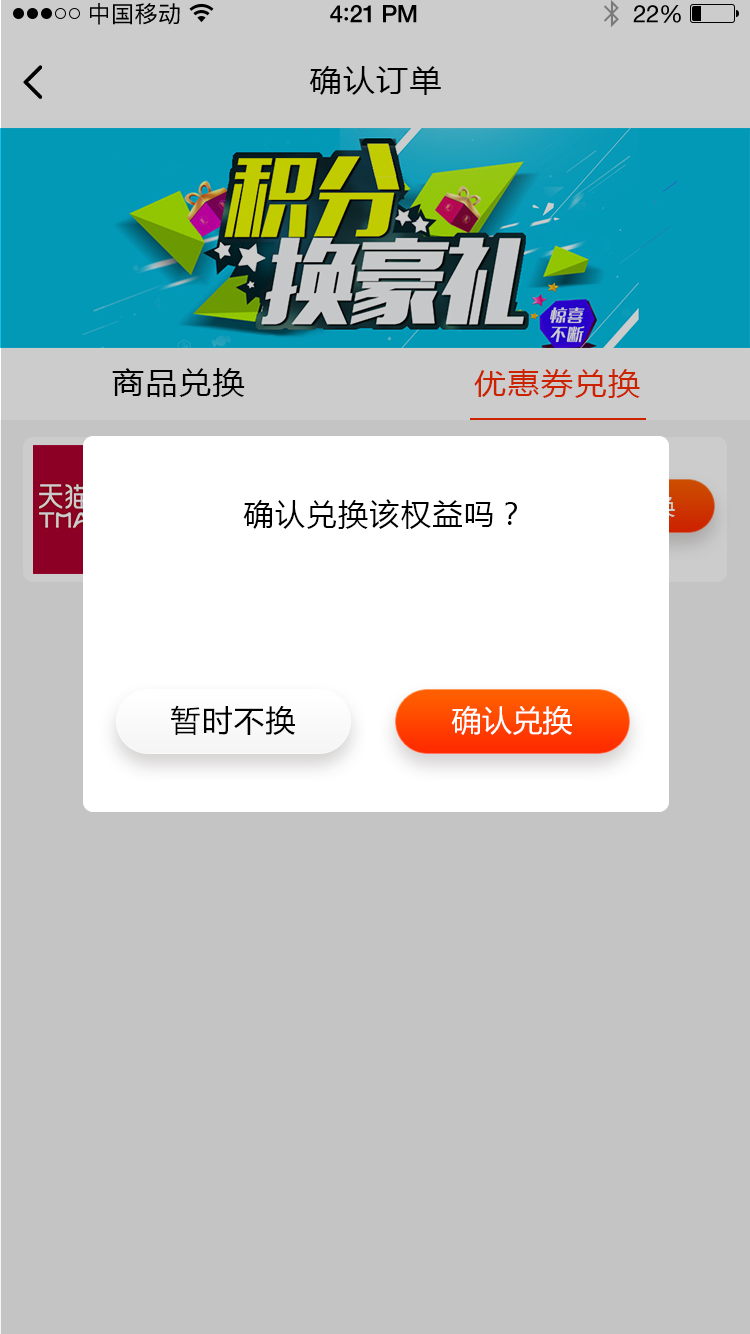
<style>
.page{position:relative;width:750px;height:1334px;background:#c4c4c4}
.page>*{position:absolute;margin:0}
.t1{font:23px "PingFangSC-Regular";letter-spacing:0.02em;color:#000000}
.t2{font:24px "HelveticaNeue-Medium";letter-spacing:-0.02em;color:#000000}
.t3{font:26px "Avenir-Medium";letter-spacing:-0.02em;color:#000000}
.t4{font:24px "HelveticaNeue";letter-spacing:-0.02em;color:#000000}
.t5{font:30px "MicrosoftYaHei";letter-spacing:0.05em;color:#000000;scale:1.06 1}
.t6{font:30px "MicrosoftYaHei";letter-spacing:0.05em;color:#cc2200;scale:1.06 1}
.t7{font:30px "MicrosoftYaHei";letter-spacing:0.05em;color:#000000;text-transform:uppercase}
.t8{font:30px "MicrosoftYaHei";letter-spacing:0.01em;color:#ffffff;text-transform:uppercase}
</style>
<div class="page">
<p class="t1" style="left:90px;top:3px;width:90px;height:22px">中国移动</p>
<p class="t2" style="left:330px;top:5px;width:87px;height:18px">4<span class="t3">:</span>21 PM</p>
<p class="t4" style="left:633px;top:5px;width:48px;height:18px">22%</p>
<p class="t5" style="left:309px;top:66px;width:132px;height:29px">确认订单</p>
<p class="t5" style="left:112px;top:368px;width:133px;height:29px">商品兑换</p>
<p class="t6" style="left:474px;top:369px;width:166px;height:29px">优惠券兑换</p>
<p class="t7" style="left:243px;top:499px;width:274px;height:30px">确认兑换该权益吗？</p>
<p class="t7" style="left:171px;top:705px;width:124px;height:30px">暂时不换</p>
<p class="t8" style="left:451px;top:706px;width:121px;height:29px">确认兑换</p>
</div>
